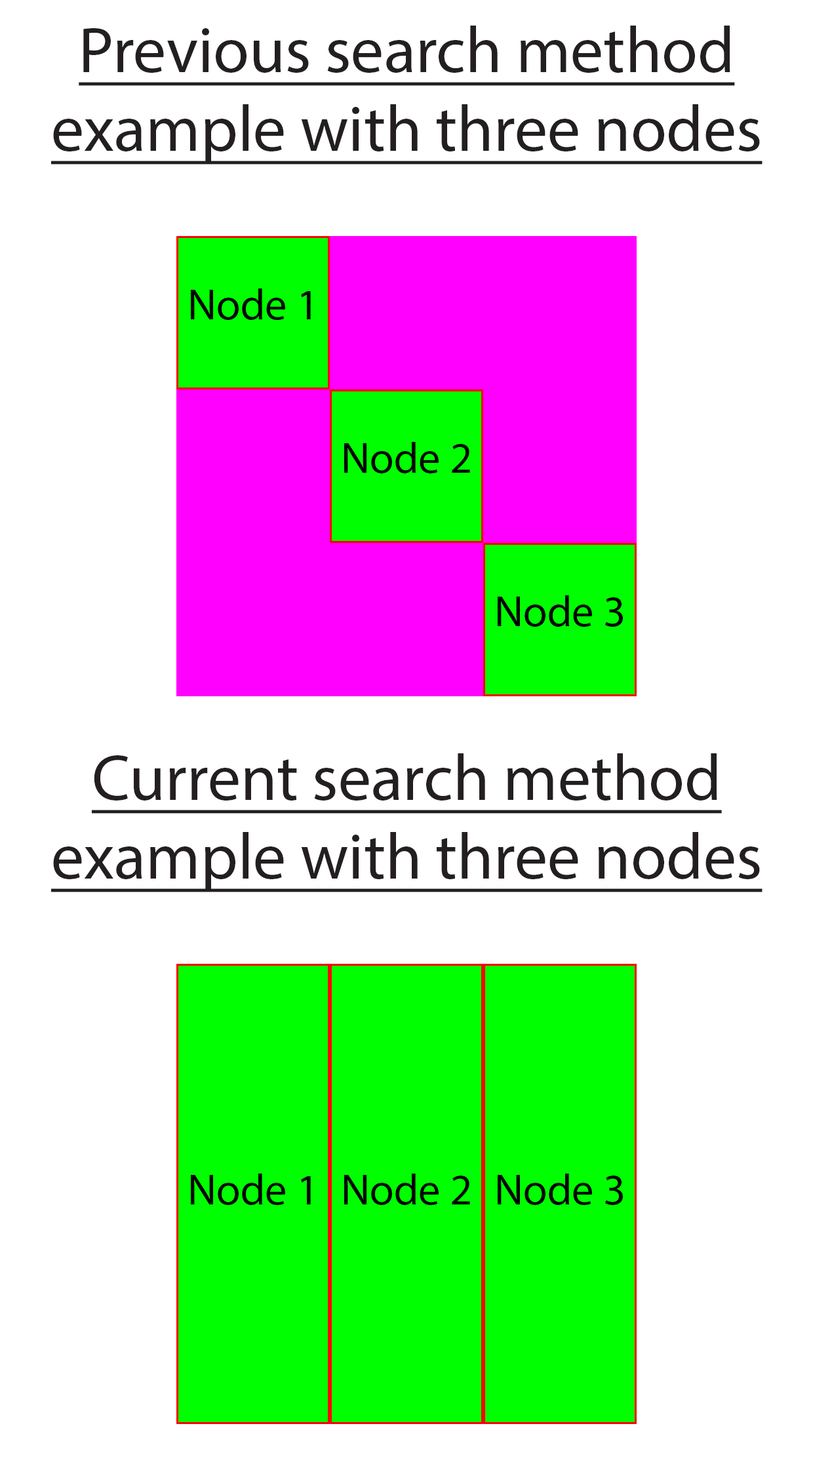
<style>
.page{position:relative;width:813px;height:1466px;background:#ffffff}
.page>*{position:absolute;margin:0}
.t1{font:65.6px "MyriadPro-Regular";color:#231f20;text-decoration:underline}
.t2{font:43.7px "MyriadPro-Regular";color:#000000}
</style>
<div class="page">
<p class="t1" style="left:51px;top:26px;width:712px;height:139px;text-align:center">Previous search method<br>example with three nodes</p>
<p class="t2" style="left:191px;top:289px;width:120px;height:31px">Node 1</p>
<p class="t2" style="left:344px;top:442px;width:126px;height:31px">Node 2</p>
<p class="t2" style="left:498px;top:595px;width:125px;height:32px">Node 3</p>
<p class="t1" style="left:51px;top:754px;width:712px;height:139px;text-align:center">Current search method<br>example with three nodes</p>
<p class="t2" style="left:191px;top:1174px;width:120px;height:31px">Node 1</p>
<p class="t2" style="left:344px;top:1174px;width:126px;height:31px">Node 2</p>
<p class="t2" style="left:498px;top:1174px;width:125px;height:31px">Node 3</p>
</div>
